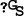
<style>
.page{position:relative;width:24px;height:16px;background:#ffffff}
.page>*{position:absolute;margin:0}
.t1{font:28.8px "CourierNewPS-BoldMT";color:#030303;font-variant:small-caps}
</style>
<div class="page">
<p class="t1" style="left:8px;top:0px;width:10px;height:10px">G</p>
<p class="t1" style="left:15px;top:6px;width:9px;height:10px">S</p>
</div>
